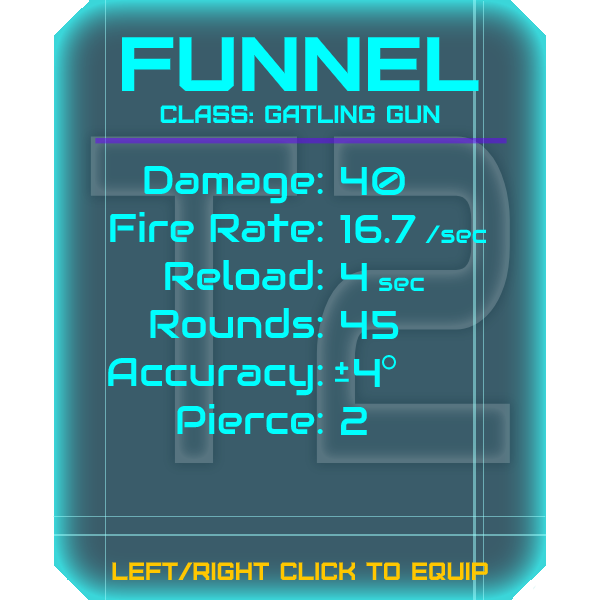
<style>
.page{position:relative;width:600px;height:600px;background:#3a5c6a}
.page>*{position:absolute;margin:0}
.t1{font:76.8px "Furore";color:#00ffff;scale:1.13 1}
.t2{font:25px "Furore";color:#00ffff}
.t3{font:40px "Audiowide-Regular";color:#00ffff}
.t4{font:25px "Audiowide-Regular";color:#00ffff}
.t5{font:25px "Furore";color:#ffc700}
</style>
<div class="page">
<p class="t1" style="left:122px;top:37px;width:357px;height:54px">funnel</p>
<p class="t2" style="left:160px;top:105px;width:280px;height:18px">Class: gatling gun</p>
<p class="t3" style="left:108px;top:165px;width:215px;height:269px;text-align:right">Damage:<br>Fire Rate:<br>Reload:<br>Rounds:<br>Accuracy:<br>Pierce:</p>
<p class="t3" style="left:340px;top:166px;width:146px;height:269px">40<br>16.7 <span class="t4">/sec<br></span>4 <span class="t4">sec<br></span>45<br> 4<br>2</p>
<p class="t5" style="left:112px;top:562px;width:376px;height:18px">left/right click to equip</p>
</div>
